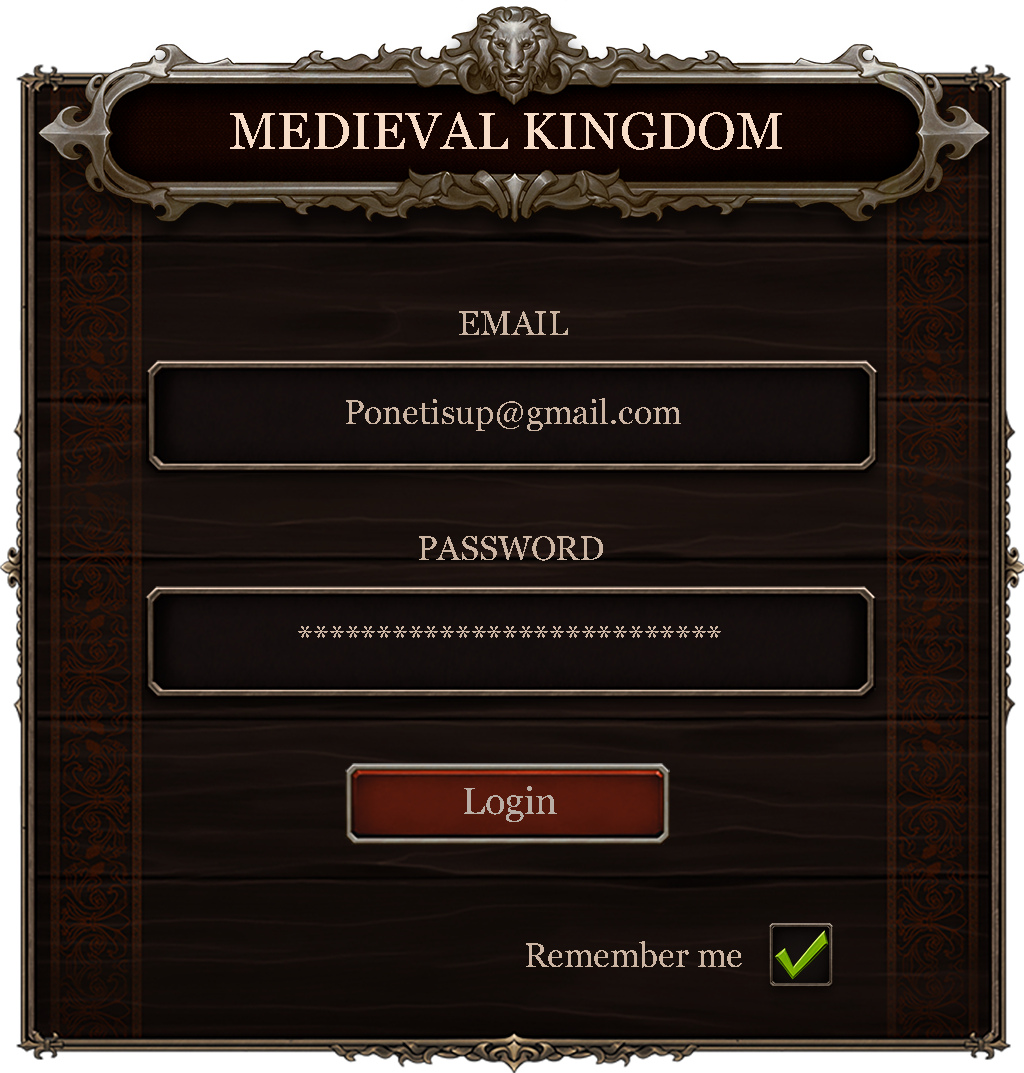
<style>
.page{position:relative;width:1024px;height:1073px}
.page>*{position:absolute;margin:0}
.t1{font:52.4px "Georgia";color:#f7ddc7}
.t2{font:33.7px "Georgia";color:#cbb5a2}
.t3{font:37.6px "Georgia";color:#b8aea5}
</style>
<div class="page">
<p class="t1" style="left:230px;top:112px;width:552px;height:38px">MEDIEVAL KINGDOM</p>
<p class="t2" style="left:459px;top:311px;width:109px;height:24px">EMAIL</p>
<p class="t2" style="left:346px;top:398px;width:335px;height:33px">Ponetisup@gmail.com</p>
<p class="t2" style="left:419px;top:536px;width:184px;height:25px">PASSWORD</p>
<p class="t2" style="left:298px;top:626px;width:423px;height:12px">***************************</p>
<p class="t3" style="left:464px;top:786px;width:93px;height:36px">Login</p>
<p class="t2" style="left:526px;top:941px;width:216px;height:27px">Remember me</p>
</div>
